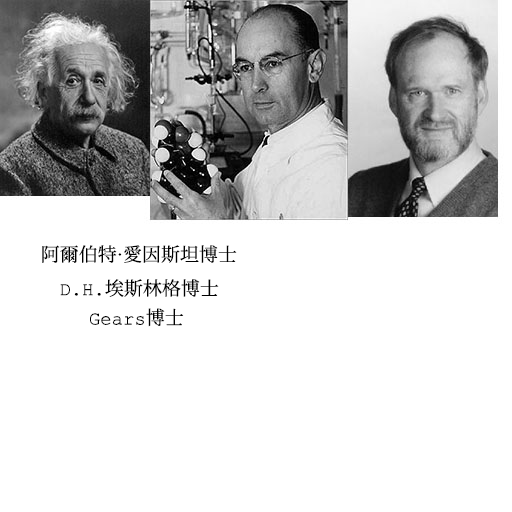
<style>
.page{position:relative;width:512px;height:512px;background:#ffffff}
.page>*{position:absolute;margin:0}
.t1{font:19px "ContainmentBreach-Regular";color:#000000}
</style>
<div class="page">
<p class="t1" style="left:42px;top:245px;width:195px;height:18px">阿爾伯特·愛因斯坦博士</p>
<p class="t1" style="left:60px;top:279px;width:159px;height:18px">D.H.埃斯林格博士</p>
<p class="t1" style="left:90px;top:308px;width:94px;height:19px">Gears博士</p>
</div>
